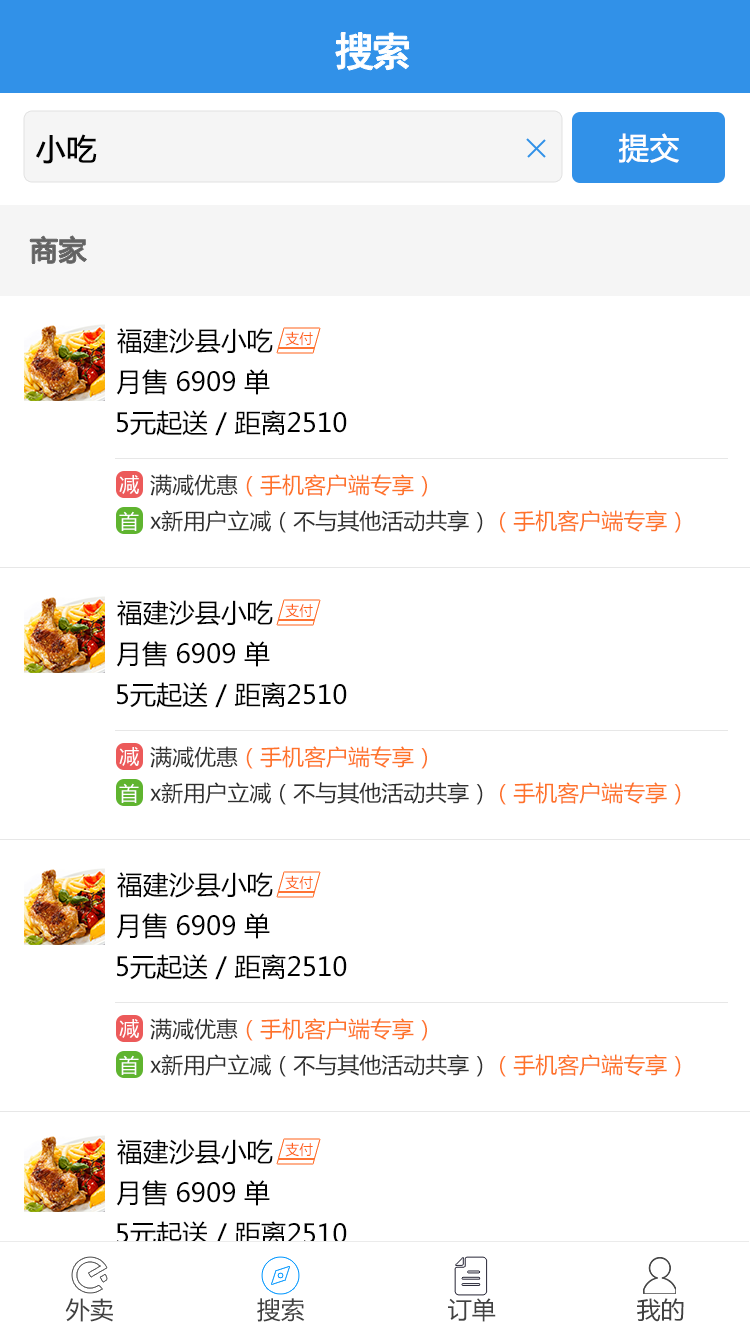
<style>
.page{position:relative;width:750px;height:1334px;background:#ffffff}
.page>*{position:absolute;margin:0}
.t1{font:40px "SimHei";letter-spacing:-0.1em;color:#ffffff;font-weight:bold}
.t2{font:30px "MicrosoftYaHei";color:#020202;font-weight:bold}
.t3{font:30px "MicrosoftYaHei";color:#ffffff;font-weight:bold}
.t4{font:28px "MicrosoftYaHei";color:#616161;font-weight:bold}
.t5{font:26px "MicrosoftYaHei";color:#020202}
.t6{font:14px "MicrosoftYaHei";color:#ff6119}
.t7{font:20px "MicrosoftYaHei";color:#ffffff}
.t8{font:22px "MicrosoftYaHei";color:#fe7329}
.t9{font:22px "MicrosoftYaHei";color:#303030}
.t10{font:24px "MicrosoftYaHei";color:#414141}
</style>
<div class="page">
<p class="t1" style="left:335px;top:32px;width:74px;height:38px">搜索</p>
<p class="t2" style="left:36px;top:134px;width:61px;height:30px">小吃</p>
<p class="t3" style="left:619px;top:133px;width:60px;height:30px">提交</p>
<p class="t4" style="left:30px;top:236px;width:57px;height:28px">商家</p>
<p class="t5" style="left:117px;top:328px;width:156px;height:26px">福建沙县小吃</p>
<p class="t6" style="left:285px;top:331px;width:28px;height:15px">支付</p>
<p class="t5" style="left:116px;top:369px;width:154px;height:26px">月售 6909 单</p>
<p class="t5" style="left:117px;top:410px;width:230px;height:26px">5元起送 / 距离2510</p>
<p class="t7" style="left:119px;top:475px;width:20px;height:19px">减</p>
<p class="t8" style="left:150px;top:474px;width:277px;height:23px"><span class="t9">满减优惠</span>（手机客户端专享）</p>
<p class="t9" style="left:150px;top:510px;width:531px;height:23px">x新用户立减（不与其他活动共享）<span class="t8">（手机客户端专享）</span></p>
<p class="t7" style="left:119px;top:511px;width:20px;height:20px">首</p>
<p class="t5" style="left:117px;top:600px;width:156px;height:26px">福建沙县小吃</p>
<p class="t6" style="left:285px;top:603px;width:28px;height:15px">支付</p>
<p class="t5" style="left:116px;top:641px;width:154px;height:26px">月售 6909 单</p>
<p class="t5" style="left:117px;top:682px;width:230px;height:26px">5元起送 / 距离2510</p>
<p class="t7" style="left:119px;top:747px;width:20px;height:19px">减</p>
<p class="t8" style="left:150px;top:746px;width:277px;height:23px"><span class="t9">满减优惠</span>（手机客户端专享）</p>
<p class="t7" style="left:119px;top:783px;width:20px;height:20px">首</p>
<p class="t9" style="left:150px;top:782px;width:531px;height:23px">x新用户立减（不与其他活动共享）<span class="t8">（手机客户端专享）</span></p>
<p class="t5" style="left:117px;top:872px;width:156px;height:26px">福建沙县小吃</p>
<p class="t6" style="left:285px;top:875px;width:28px;height:15px">支付</p>
<p class="t5" style="left:116px;top:913px;width:154px;height:26px">月售 6909 单</p>
<p class="t5" style="left:117px;top:954px;width:230px;height:26px">5元起送 / 距离2510</p>
<p class="t7" style="left:119px;top:1019px;width:20px;height:19px">减</p>
<p class="t8" style="left:150px;top:1018px;width:277px;height:23px"><span class="t9">满减优惠</span>（手机客户端专享）</p>
<p class="t7" style="left:119px;top:1055px;width:20px;height:20px">首</p>
<p class="t9" style="left:150px;top:1054px;width:531px;height:23px">x新用户立减（不与其他活动共享）<span class="t8">（手机客户端专享）</span></p>
<p class="t5" style="left:117px;top:1139px;width:156px;height:26px">福建沙县小吃</p>
<p class="t6" style="left:285px;top:1142px;width:28px;height:15px">支付</p>
<p class="t5" style="left:116px;top:1180px;width:154px;height:26px">月售 6909 单</p>
<p class="t5" style="left:117px;top:1221px;width:230px;height:26px">5元起送 / 距离2510</p>
<p class="t10" style="left:65px;top:1298px;width:48px;height:24px">外卖</p>
<p class="t10" style="left:257px;top:1298px;width:48px;height:24px">搜索</p>
<p class="t10" style="left:448px;top:1298px;width:48px;height:24px">订单</p>
<p class="t10" style="left:637px;top:1298px;width:47px;height:24px">我的</p>
</div>
